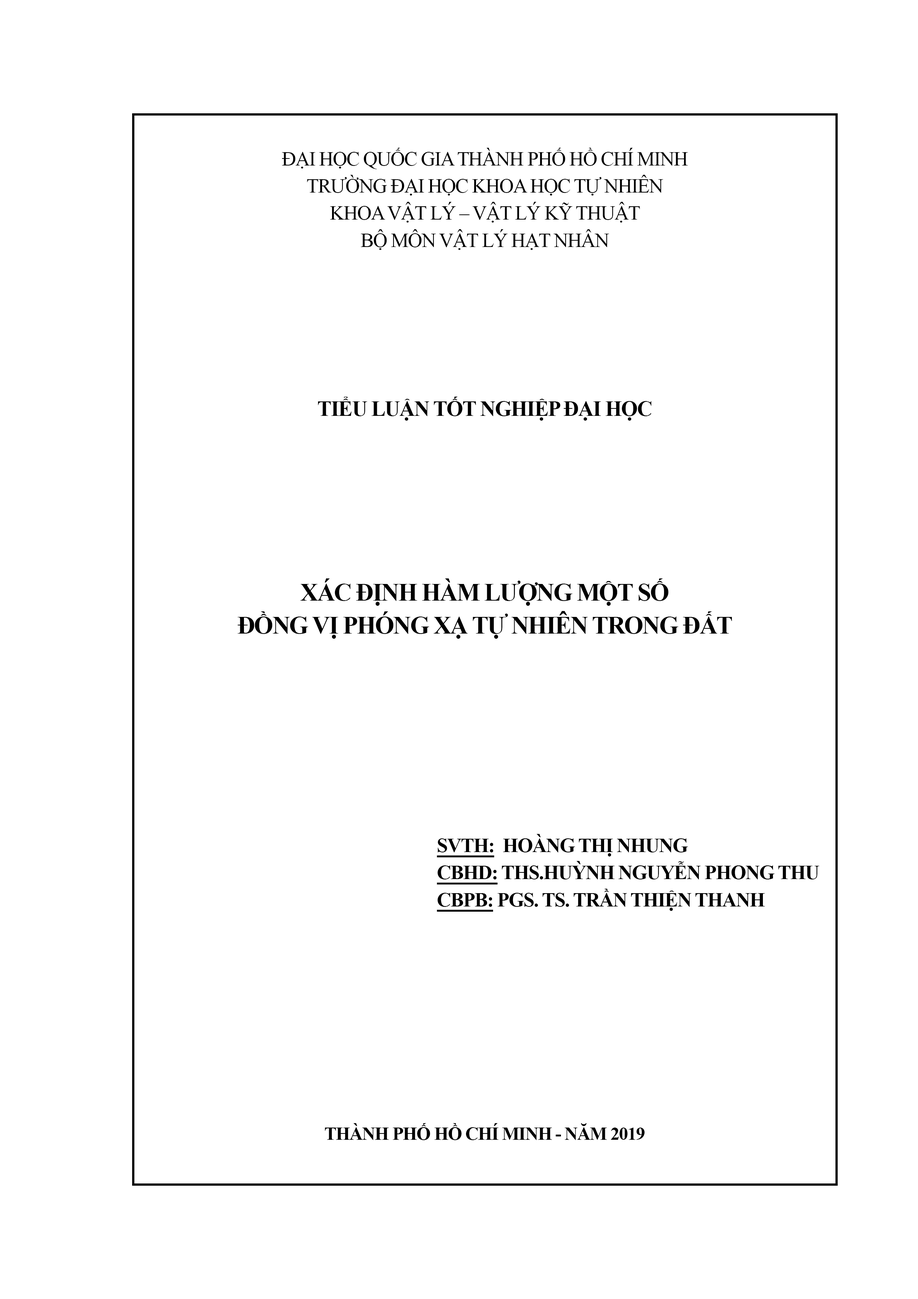
<style>
.page{position:relative;width:918px;height:1299px;background:#ffffff}
.page>*{position:absolute;margin:0}
.t1{font:20.1px "TimesNewRomanPSMT";letter-spacing:-0.04em;color:#000000;text-transform:uppercase}
.t2{font:21.6px "TimesNewRomanPS-BoldMT";letter-spacing:-0.04em;color:#000000}
.t3{font:24.7px "TimesNewRomanPS-BoldMT";letter-spacing:-0.04em;color:#000000;text-transform:uppercase}
.t4{font:20.1px "TimesNewRomanPS-BoldMT";letter-spacing:-0.04em;color:#000000;text-transform:uppercase}
.t5{font:20.1px "TimesNewRomanPS-BoldMT";letter-spacing:-0.04em;color:#000000;text-transform:uppercase;text-decoration:underline}
.t6{font:18.5px "TimesNewRomanPS-BoldMT";letter-spacing:-0.04em;color:#000000;text-transform:uppercase}
</style>
<div class="page">
<p class="t1" style="left:282px;top:148px;width:406px;height:102px;text-align:center">ĐẠI HỌC QUỐC GIA THÀNH PHỐ HỒ CHÍ MINH<br>TRƯỜNG ĐẠI HỌC KHOA HỌC TỰ NHIÊN<br>KHOA VẬT LÝ – VẬT LÝ KỸ THUẬT<br>Bộ môn VẬT LÝ HẠT NHÂN</p>
<p class="t2" style="left:318px;top:397px;width:334px;height:24px">TIỂU LUẬN TỐT NGHIỆP ĐẠI HỌC</p>
<p class="t3" style="left:238px;top:578px;width:494px;height:61px;text-align:center">XÁC ĐỊNH HÀM LƯỢNG MỘT SỐ <br>ĐỒNG VỊ PHÓNG XẠ TỰ NHIÊN TRONG ĐẤT</p>
<p class="t4" style="left:437px;top:834px;width:383px;height:77px"><span class="t5">SVTH:</span>  Hoàng Thị Nhung<br><span class="t5">CBHD:</span> ThS.Huỳnh Nguyễn Phong Thu<br><span class="t5">CBPB:</span> PGS. TS. TRẦN THIỆN THANH</p>
<p class="t6" style="left:325px;top:1123px;width:320px;height:17px">thành phố hồ chí minh - Năm 2019</p>
</div>
